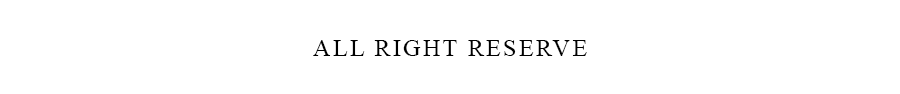
<style>
.page{position:relative;width:900px;height:94px;background:#ffffff}
.page>*{position:absolute;margin:0}
.t1{font:24px "TimesNewRomanPSMT";letter-spacing:0.1em;color:#000000}
</style>
<div class="page">
<p class="t1" style="left:313px;top:40px;width:274px;height:16px">ALL RIGHT RESERVE</p>
</div>
